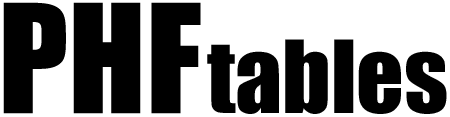
<style>
.page{position:relative;width:450px;height:117px;background:#000000}
.page>*{position:absolute;margin:0}
.t1{font:93px "Impact";color:#000000}
.t2{font:139.5px "Impact";color:#000000}
</style>
<div class="page">
<p class="t1" style="left:3px;top:2px;width:444px;height:112px"><span class="t2">PHF </span>tables</p>
</div>
